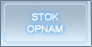
<style>
.page{position:relative;width:92px;height:47px}
.page>*{position:absolute;margin:0}
.t1{font:9.8px/11.7px "ArialMT";letter-spacing:-0.02em;color:#fcfcfc;font-weight:bold}
</style>
<div class="page">
<p class="t1" style="left:27px;top:13px;width:36px;height:20px;text-align:center">STOK<br>OPNAM</p>
</div>
